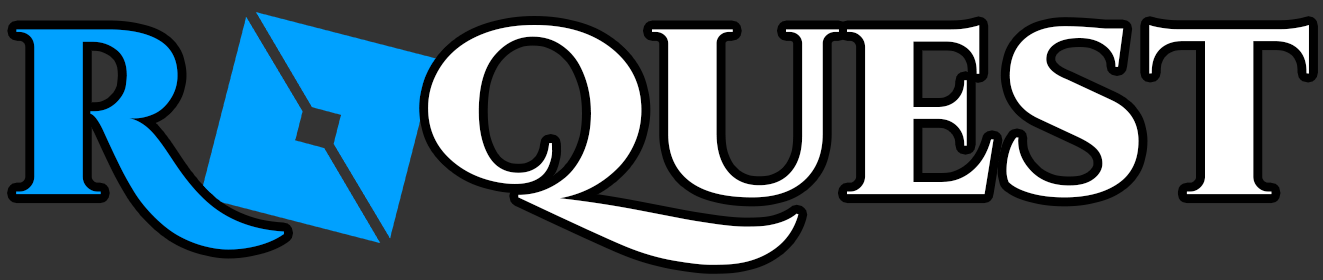
<style>
.page{position:relative;width:1323px;height:280px;background:#333333}
.page>*{position:absolute;margin:0}
.t1{font:234.7px "CinzelDecorative-Black";color:#ffffff}
.t2{font:234.7px "CinzelDecorative-Black";color:#00a1ff}
</style>
<div class="page">
<p class="t1" style="left:16px;top:25px;width:1293px;height:240px"><span class="t2">R    </span>Quest</p>
</div>
